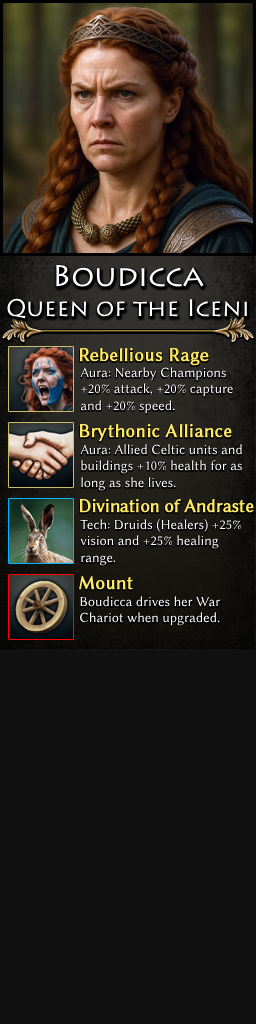
<style>
.page{position:relative;width:256px;height:1024px;background:#111111}
.page>*{position:absolute;margin:0}
.t1{font:24px/30px "Lithos";color:#ffffff}
.t2{font:30px/30px "Lithos";color:#ffffff}
.t3{font:19px "LinBiolinumO";color:#ffe963;font-weight:bold}
.t4{font:14px "LinBiolinumO";color:#ffffff}
.t5{font:19px "LinBiolinumO";letter-spacing:-0.025em;color:#ffe963;font-weight:bold}
</style>
<div class="page">
<p class="t1" style="left:7px;top:264px;width:240px;height:55px;text-align:center"><span class="t2">Boudicca<br></span>Queen of the Iceni</p>
<p class="t3" style="left:79px;top:348px;width:130px;height:18px">Rebellious Rage</p>
<p class="t4" style="left:80px;top:367px;width:153px;height:47px">Aura: Nearby Champions <br>+20% attack, +20% capture <br>and +20% speed.</p>
<p class="t3" style="left:79px;top:424px;width:153px;height:18px">Brythonic Alliance</p>
<p class="t4" style="left:80px;top:444px;width:162px;height:47px">Aura: Allied Celtic units and<br>buildings +10% health for as <br>long as she lives.</p>
<p class="t5" style="left:79px;top:499px;width:175px;height:14px">Divination of Andraste</p>
<p class="t4" style="left:80px;top:519px;width:162px;height:47px">Tech: Druids (Healers) +25%<br>vision and +25% healing <br>range.</p>
<p class="t3" style="left:79px;top:576px;width:54px;height:14px">Mount</p>
<p class="t4" style="left:80px;top:596px;width:140px;height:30px">Boudicca drives her War <br>Chariot when upgraded.</p>
</div>
